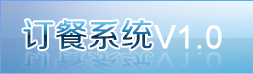
<style>
.page{position:relative;width:253px;height:74px}
.page>*{position:absolute;margin:0}
.t1{font:32px "FZZHJW--GB1-0";font-weight:bold}
.t2{font:32px "ArialMT";color:#ffffff;font-weight:bold}
</style>
<div class="page">
<p class="t1" style="left:23px;top:20px;width:129px;height:30px">订餐系统</p>
<p class="t2" style="left:154px;top:25px;width:68px;height:24px">V1.0</p>
</div>
